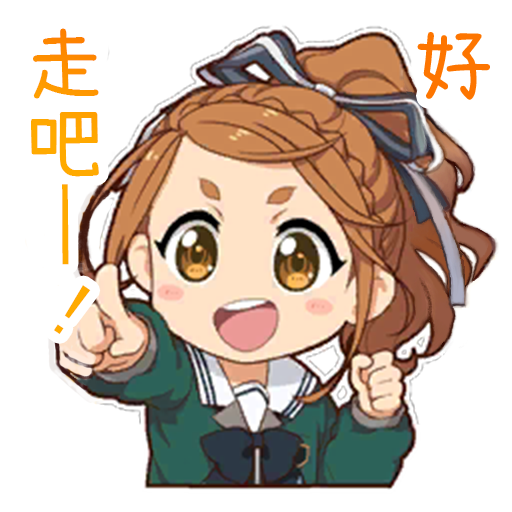
<style>
.page{position:relative;width:512px;height:512px;background:#ffffff}
.page>*{position:absolute;margin:0}
.t1{font:80px "SetoFont";color:#ffa500}
.t2{font:80px "MS-UIGothic";color:#ff9300}
</style>
<div class="page">
<p class="t1" style="left:31px;top:28px;width:68px;height:237px">走吧─</p>
<p class="t2" style="left:54px;top:285px;width:37px;height:49px;rotate:-56deg">!</p>
</div>
